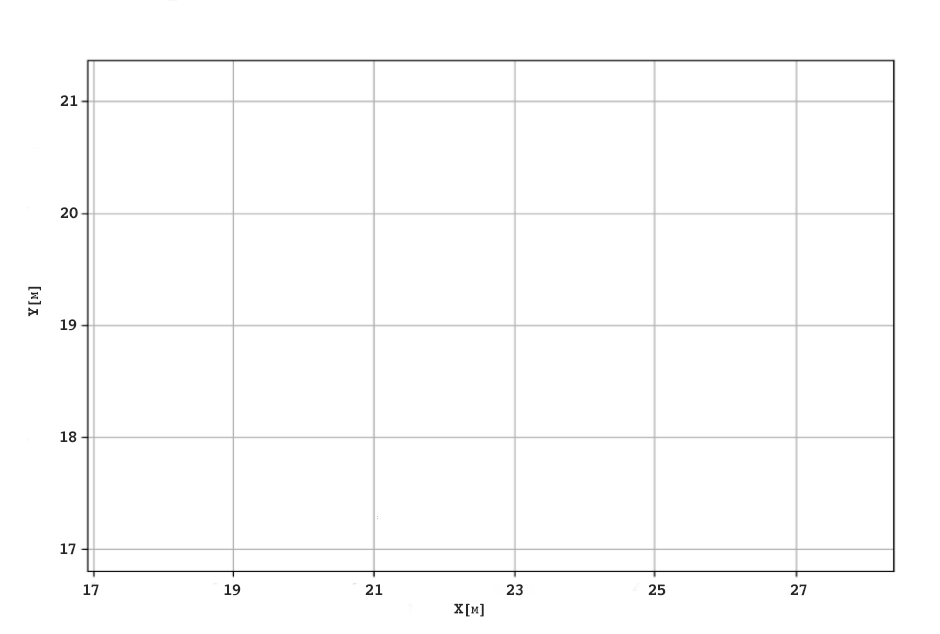
<style>
.page{position:relative;width:940px;height:634px;background:#ffffff}
.page>*{position:absolute;margin:0}
.t1{font:17px "Courier-Bold";letter-spacing:-0.075em;color:#292828;text-transform:uppercase}
.t2{font:17px "Courier-Bold";letter-spacing:-0.075em;color:#292828;font-variant:small-caps}
</style>
<div class="page">
<p class="t1" style="left:60px;top:95px;width:18px;height:11px">21</p>
<p class="t1" style="left:60px;top:207px;width:18px;height:12px">20</p>
<p class="t1" style="left:28px;top:286px;width:13px;height:31px;rotate:-90deg">Y[<span class="t2">m</span>]</p>
<p class="t1" style="left:60px;top:319px;width:17px;height:12px">19</p>
<p class="t1" style="left:60px;top:431px;width:17px;height:12px">18</p>
<p class="t1" style="left:60px;top:543px;width:16px;height:12px">17</p>
<p class="t1" style="left:83px;top:584px;width:16px;height:12px">17</p>
<p class="t1" style="left:224px;top:584px;width:17px;height:12px">19</p>
<p class="t1" style="left:365px;top:584px;width:18px;height:11px">21</p>
<p class="t1" style="left:506px;top:584px;width:17px;height:12px">23</p>
<p class="t1" style="left:648px;top:584px;width:18px;height:12px">25</p>
<p class="t1" style="left:790px;top:584px;width:17px;height:12px">27</p>
<p class="t1" style="left:454px;top:603px;width:30px;height:14px">X[<span class="t2">m</span>]</p>
</div>
